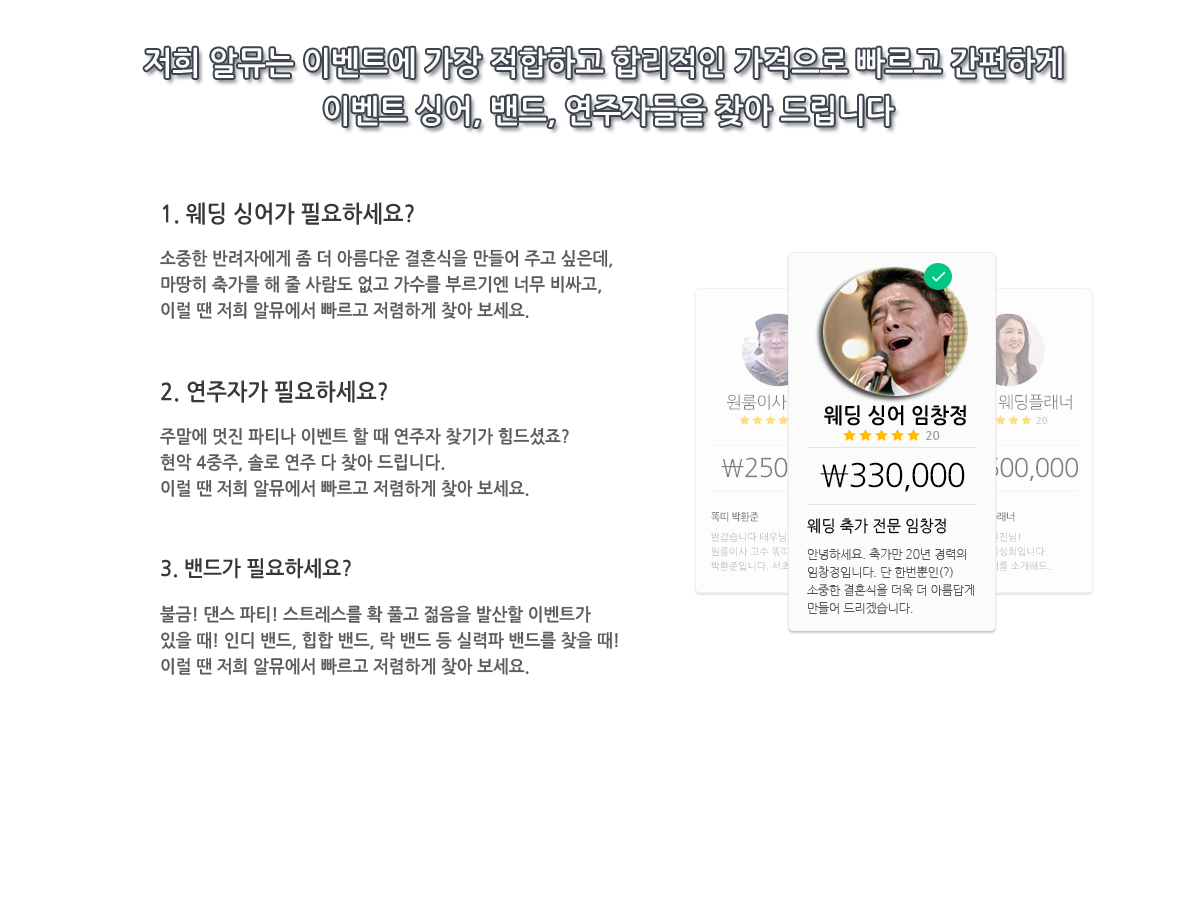
<style>
.page{position:relative;width:1200px;height:899px;background:#ffffff}
.page>*{position:absolute;margin:0}
.t1{font:17.8px/26px "NanumGothicBold";color:#5f5b5b;scale:0.94 1}
.t2{font:23.1px/48px "NanumGothicBold";color:#383838;scale:0.94 1}
.t3{font:21.4px/48px "NanumGothicBold";color:#383838;scale:0.94 1}
</style>
<div class="page">
<p class="t1" style="left:160px;top:202px;width:458px;height:473px"><span class="t2">1. 웨딩 싱어가 필요하세요?<br></span>소중한 반려자에게 좀 더 아름다운 결혼식을 만들어 주고 싶은데,<br>마땅히 축가를 해 줄 사람도 없고 가수를 부르기엔 너무 비싸고,<br>이럴 땐 저희 알뮤에서 빠르고 저렴하게 찾아 보세요.<br><br><br><span class="t2">2. 연주자가 필요하세요?<br></span>주말에 멋진 파티나 이벤트 할 때 연주자 찾기가 힘드셨죠?<br>현악 4중주, 솔로 연주 다 찾아 드립니다. <br>이럴 땐 저희 알뮤에서 빠르고 저렴하게 찾아 보세요.<br><br><br><span class="t3">3. 밴드가 필요하세요?<br></span>불금! 댄스 파티! 스트레스를 확 풀고 젊음을 발산할 이벤트가 <br>있을 때! 인디 밴드, 힙합 밴드, 락 밴드 등 실력파 밴드를 찾을 때!<br>이럴 땐 저희 알뮤에서 빠르고 저렴하게 찾아 보세요.</p>
</div>
